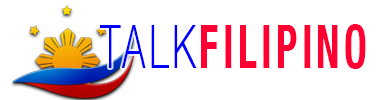
<style>
.page{position:relative;width:378px;height:100px;background:#ffffff}
.page>*{position:absolute;margin:0}
.t1{font:60.1px "HelveticaNeue-CondensedBold";letter-spacing:0.1em;color:#ff0033;scale:0.69 1}
.t2{font:60.1px "HelveticaNeue-Light";letter-spacing:0.1em;color:#0000ff;scale:0.61 1}
</style>
<div class="page">
<p class="t1" style="left:99px;top:24px;width:267px;height:45px"><span class="t2">TALK</span>FILIPINO</p>
</div>
